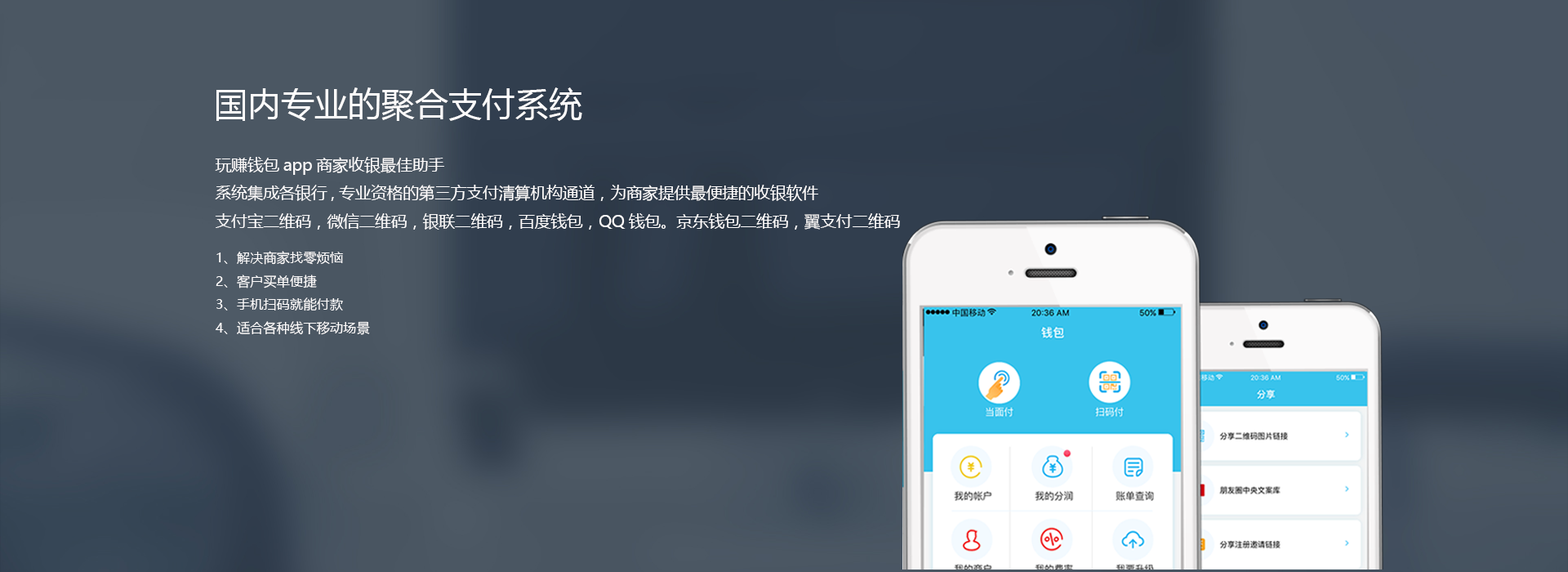
<style>
.page{position:relative;width:1568px;height:572px}
.page>*{position:absolute;margin:0}
.t1{font:33.5px "MicrosoftYaHei";color:#fefcfc}
.t2{font:16px "MicrosoftYaHei";color:#fefcfc}
.t3{font:13.3px "MicrosoftYaHei";color:#fefcfc}
</style>
<div class="page">
<p class="t1" style="left:216px;top:87px;width:366px;height:34px">国内专业的聚合支付系统</p>
<p class="t2" style="left:215px;top:157px;width:685px;height:72px">玩赚钱包app商家收银最佳助手<br>系统集成各银行,专业资格的第三方支付清算机构通道，为商家提供最便捷的收银软件<br>支付宝二维码，微信二维码，银联二维码，百度钱包，QQ钱包。京东钱包二维码，翼支付二维码</p>
<p class="t3" style="left:216px;top:251px;width:154px;height:84px">1、解决商家找零烦恼<br>2、客户买单便捷<br>3、手机扫码就能付款<br>4、适合各种线下移动场景</p>
</div>
